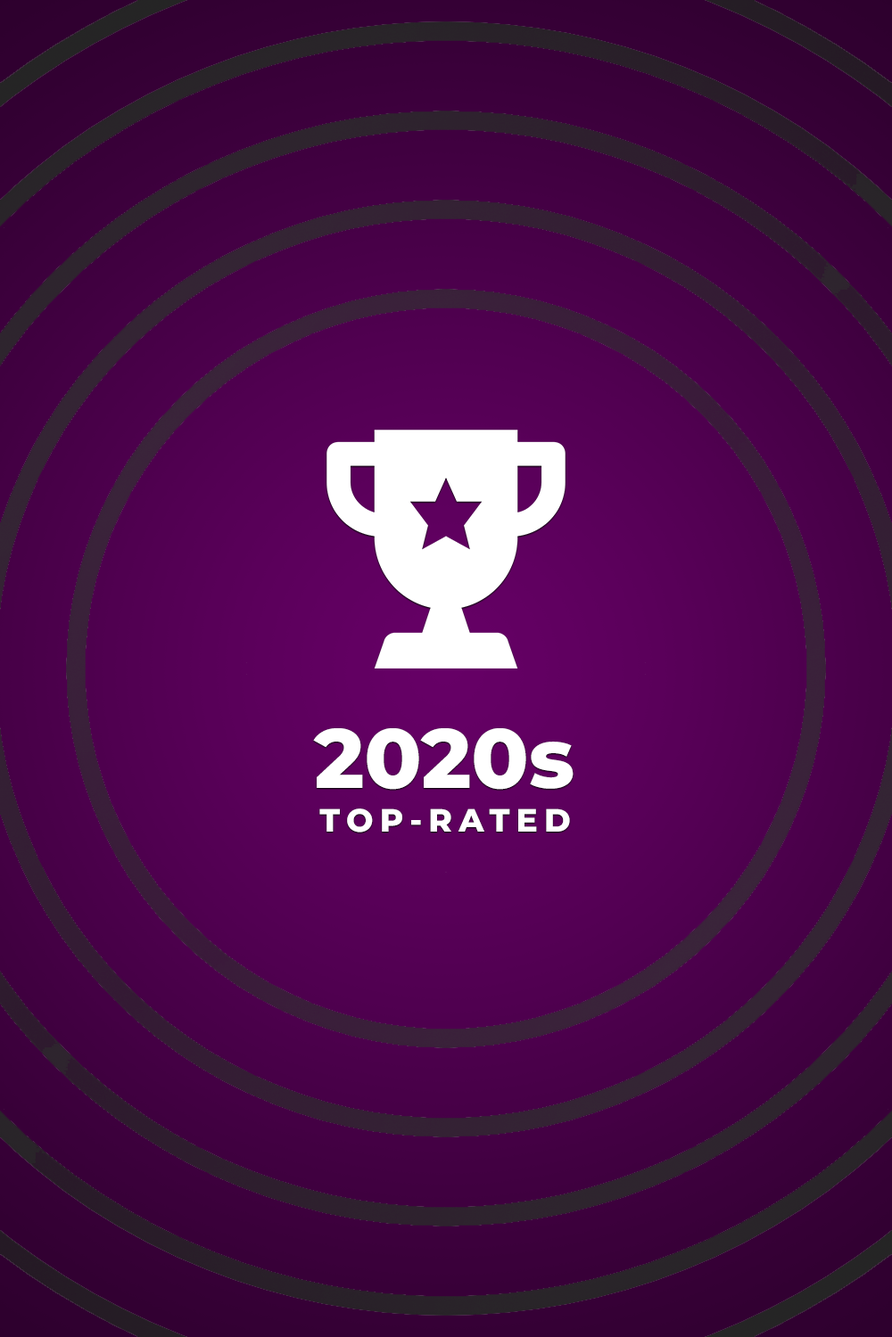
<style>
.page{position:relative;width:892px;height:1337px}
.page>*{position:absolute;margin:0}
.t1{font:83.8px "MontserratRoman-ExtraBold";color:#ffffff}
.t2{font:32.1px "MontserratRoman-ExtraBold";letter-spacing:0.2em;color:#ffffff}
</style>
<div class="page">
<p class="t1" style="left:313px;top:728px;width:260px;height:62px">2020s</p>
<p class="t2" style="left:319px;top:809px;width:251px;height:24px">TOP-RATED</p>
</div>
